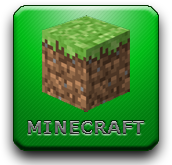
<style>
.page{position:relative;width:172px;height:165px}
.page>*{position:absolute;margin:0}
.t1{font:18px "Verdana-Bold"}
</style>
<div class="page">
<p class="t1" style="left:28px;top:121px;width:116px;height:13px">MINECRAFT</p>
</div>
